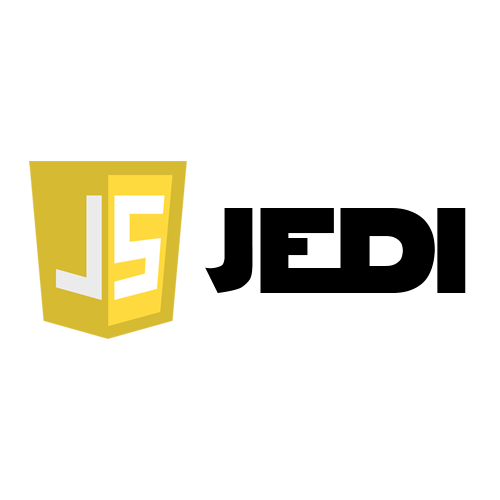
<style>
.page{position:relative;width:500px;height:500px;background:#ffffff}
.page>*{position:absolute;margin:0}
.t1{font:120.8px "StarJediSpecialEdition";color:#000000}
</style>
<div class="page">
<p class="t1" style="left:205px;top:208px;width:261px;height:85px">Jedi</p>
</div>
